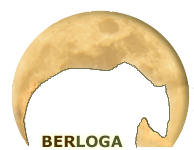
<style>
.page{position:relative;width:194px;height:150px;background:#ffffff}
.page>*{position:absolute;margin:0}
.t1{font:15.4px "Verdana-Bold";color:#50552f}
.t2{font:15.4px "Verdana-Bold";color:#4d3305}
</style>
<div class="page">
<p class="t1" style="left:42px;top:135px;width:81px;height:13px"><span class="t2">BER</span>LOGA</p>
</div>
